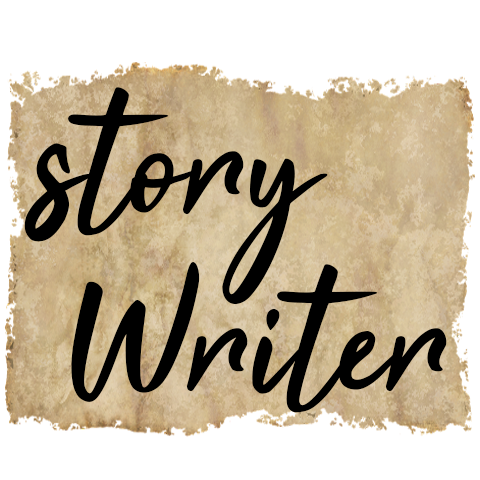
<style>
.page{position:relative;width:480px;height:480px;background:#ffffff}
.page>*{position:absolute;margin:0}
.t1{font:180px "Tahu!";color:#000000}
</style>
<div class="page">
<p class="t1" style="left:24px;top:87px;width:304px;height:217px">story</p>
<p class="t1" style="left:71px;top:262px;width:376px;height:151px">Writer</p>
</div>
